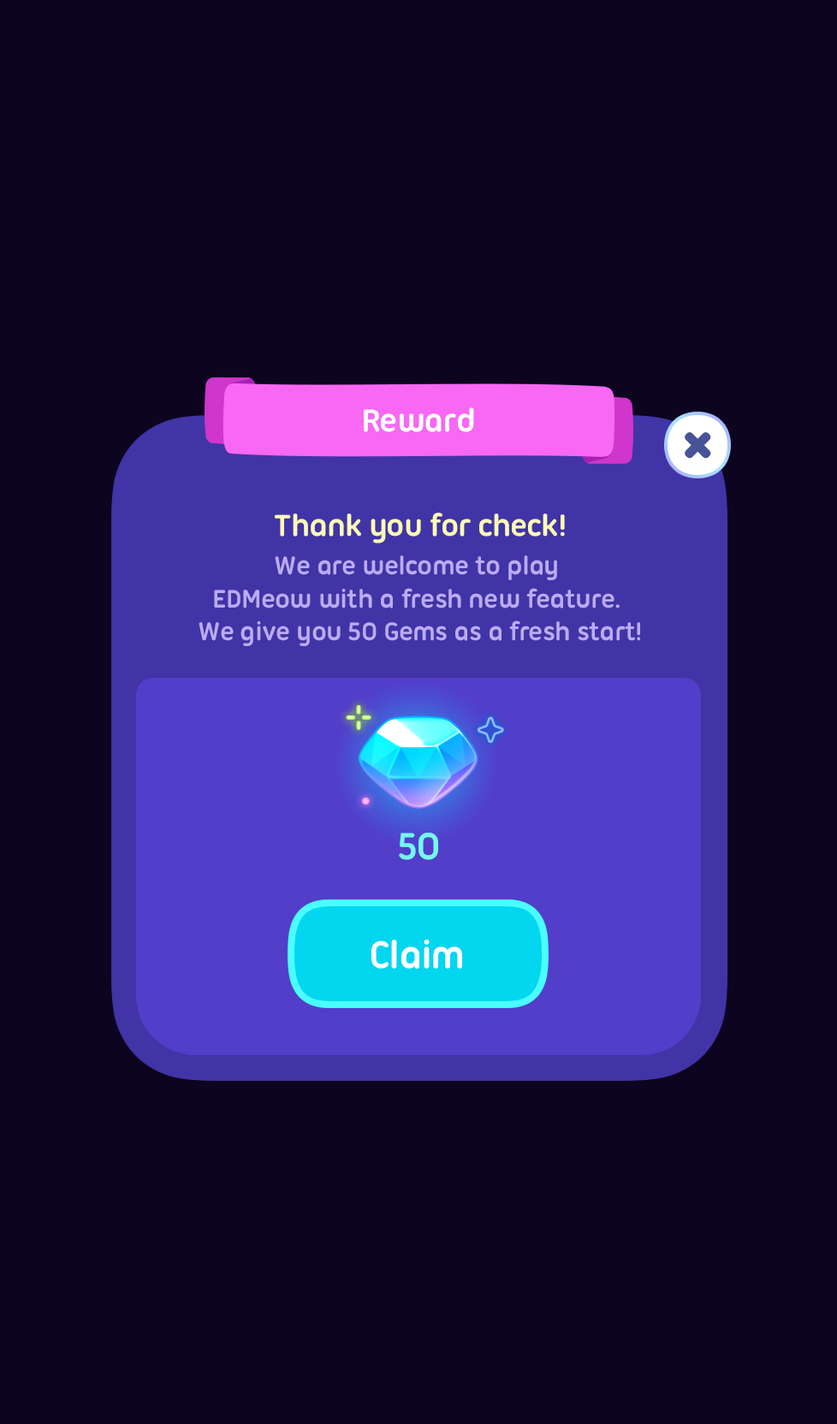
<style>
.page{position:relative;width:837px;height:1424px;background:#0d0420}
.page>*{position:absolute;margin:0}
.t1{font:34.2px "UbuntuTitling-Bold";letter-spacing:-0.025em;color:#ffffff}
.t2{font:32.5px "UbuntuTitling-Bold";letter-spacing:-0.025em;color:#fefbb7}
.t3{font:27.4px "UbuntuTitling-Bold";letter-spacing:-0.025em;color:#bbabf4}
.t4{font:40.6px "UbuntuTitling-Bold";letter-spacing:-0.025em;color:#73f8ee}
.t5{font:41.1px "UbuntuTitling-Bold";letter-spacing:-0.025em;color:#ffffff}
</style>
<div class="page">
<p class="t1" style="left:364px;top:407px;width:110px;height:25px">Reward</p>
<p class="t2" style="left:274px;top:513px;width:291px;height:31px">Thank you for check!</p>
<p class="t3" style="left:199px;top:556px;width:441px;height:90px;text-align:center">We are welcome to play <br>EDMeow with a fresh new feature. <br>We give you 50 Gems as a fresh start!</p>
<p class="t4" style="left:399px;top:833px;width:39px;height:27px">50</p>
<p class="t5" style="left:372px;top:940px;width:90px;height:29px">Claim</p>
</div>
